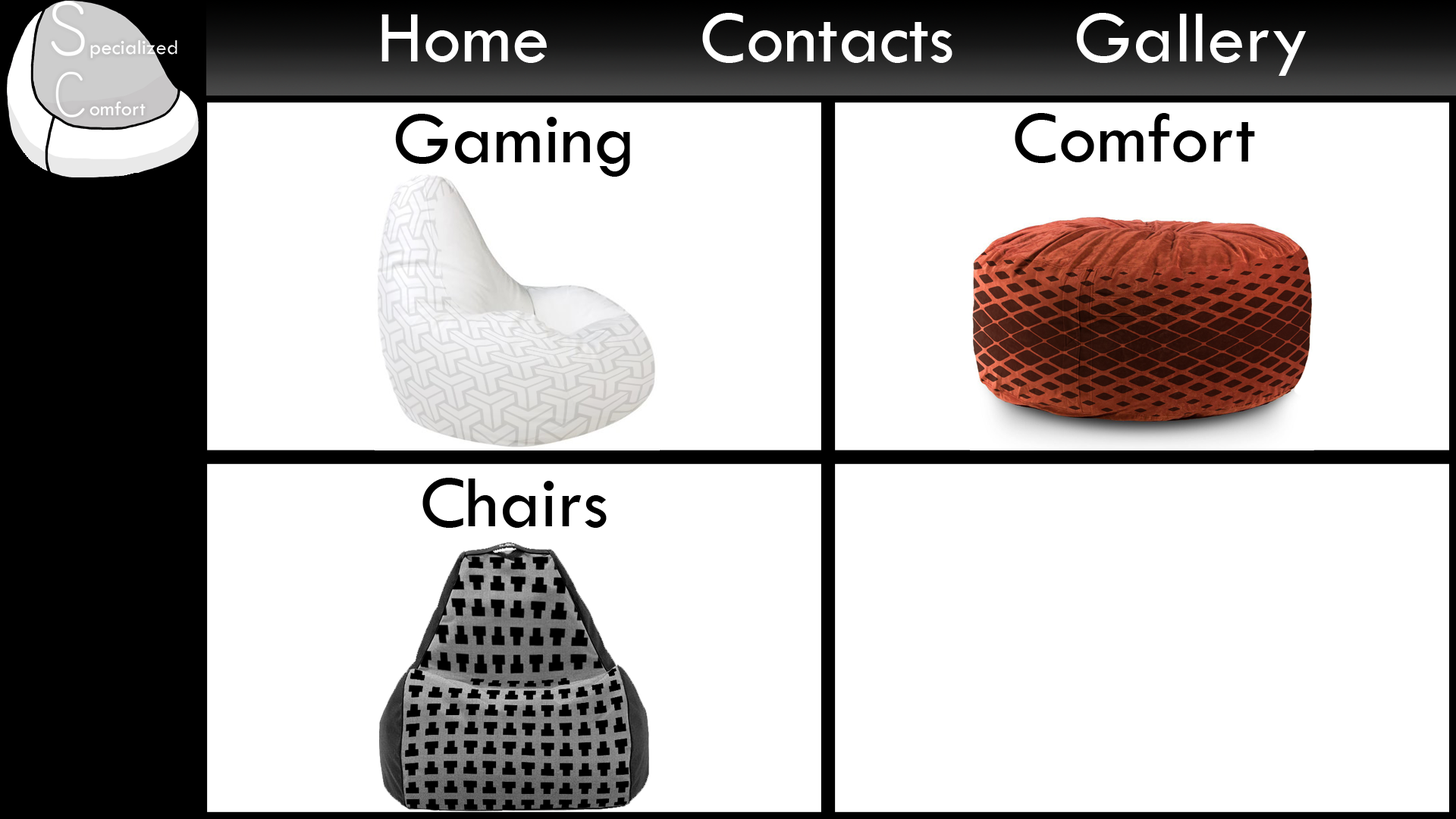
<style>
.page{position:relative;width:1456px;height:819px;background:#ffffff}
.page>*{position:absolute;margin:0}
.t1{font:75.8px "TwCenMT-Regular";color:#ffffff}
.t2{font:75.8px "TwCenMT-Regular";color:#000000}
</style>
<div class="page">
<p class="t1" style="left:381px;top:14px;width:166px;height:49px">Home</p>
<p class="t1" style="left:702px;top:13px;width:250px;height:50px">Contacts</p>
<p class="t1" style="left:1076px;top:13px;width:231px;height:63px">Gallery</p>
<p class="t2" style="left:395px;top:114px;width:235px;height:63px">Gaming</p>
<p class="t2" style="left:1015px;top:113px;width:240px;height:50px">Comfort</p>
<p class="t2" style="left:422px;top:478px;width:185px;height:50px">Chairs</p>
</div>
